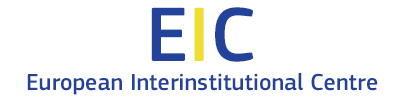
<style>
.page{position:relative;width:402px;height:105px;background:#ffffff}
.page>*{position:absolute;margin:0}
.t1{font:80.1px "ECSquareSansProMedium";color:#23429a}
.t2{font:80.1px "ECSquareSansProMedium";color:#ecdf2e}
.t3{font:24px "ECSquareSansProMedium";color:#23429a}
</style>
<div class="page">
<p class="t1" style="left:151px;top:7px;width:103px;height:55px">E<span class="t2">I</span>C</p>
<p class="t3" style="left:27px;top:73px;width:351px;height:22px">European Interinstitutional Centre</p>
</div>
